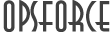
<style>
.page{position:relative;width:112px;height:32px;background:#ffffff}
.page>*{position:absolute;margin:0}
.t1{font:43.3px "AnnaStd";color:#404040}
</style>
<div class="page">
<p class="t1" style="left:3px;top:0px;width:107px;height:33px">opsforce</p>
</div>
